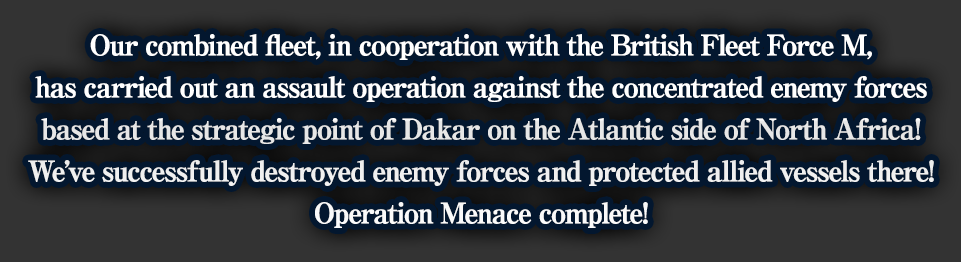
<style>
.page{position:relative;width:961px;height:262px;background:#03172f}
.page>*{position:absolute;margin:0}
.t1{font:28px/42px "RyuminPro-ExBold";letter-spacing:-0.08em;color:#ffffff;font-weight:bold}
</style>
<div class="page">
<p class="t1" style="left:28px;top:34px;width:906px;height:194px;text-align:center">Our combined fleet, in cooperation with the British Fleet Force M,<br>has carried out an assault operation against the concentrated enemy forces<br>based at the strategic point of Dakar on the Atlantic side of North Africa!<br>We’ve successfully destroyed enemy forces and protected allied vessels there!<br>Operation Menace complete!</p>
</div>
